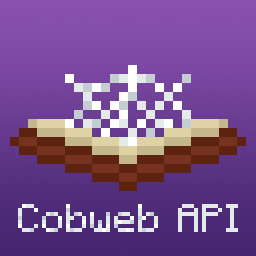
<style>
.page{position:relative;width:256px;height:256px}
.page>*{position:absolute;margin:0}
.t1{font:40px "Minecraft-Regular";color:#e4e9e9}
</style>
<div class="page">
<p class="t1" style="left:18px;top:204px;width:220px;height:28px">Cobweb API</p>
</div>
